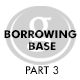
<style>
.page{position:relative;width:80px;height:80px;background:#ffffff}
.page>*{position:absolute;margin:0}
.t1{font:11px/12px "FuturaBT-Bold";color:#000000;text-transform:uppercase}
.t2{font:11px/12px "FuturaBT-Medium";color:#000000;text-transform:uppercase}
</style>
<div class="page">
<p class="t1" style="left:4px;top:30px;width:73px;height:45px;text-align:center">Borrowing <br>Base<br><br><span class="t2">Part 3</span></p>
</div>
